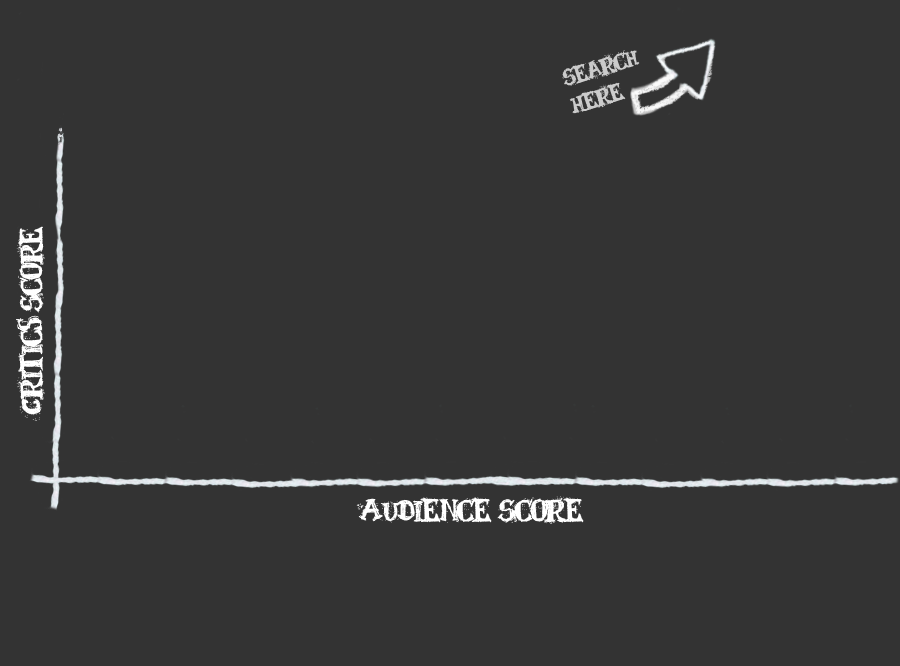
<style>
.page{position:relative;width:900px;height:666px;background:#333333}
.page>*{position:absolute;margin:0}
.t1{font:23.9px "BlackBoard";letter-spacing:-0.01em;color:#cbcbcb}
.t2{font:32px "BlackBoard";letter-spacing:-0.01em;color:#ffffff}
</style>
<div class="page">
<p class="t1" style="left:562px;top:50px;width:78px;height:64px;rotate:-17deg">Search <br>Here</p>
<p class="t2" style="left:16px;top:226px;width:29px;height:195px;rotate:-90deg">Critics Score</p>
<p class="t2" style="left:356px;top:496px;width:228px;height:28px">Audience Score</p>
</div>
